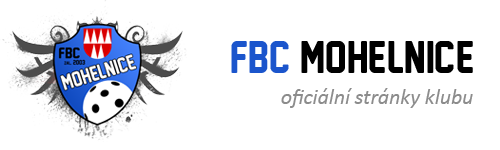
<style>
.page{position:relative;width:500px;height:150px;background:#ffffff}
.page>*{position:absolute;margin:0}
.t1{font:41.8px "NewAthleticM54";color:#000000}
.t2{font:41.8px "NewAthleticM54";color:#1b55cc}
.t3{font:21.8px "Calibri-Italic";color:#8c8c8c}
</style>
<div class="page">
<p class="t1" style="left:231px;top:41px;width:242px;height:32px"><span class="t2">FBC </span>MOhelnice</p>
<p class="t3" style="left:281px;top:88px;width:192px;height:20px">oficiální stránky klubu</p>
</div>
